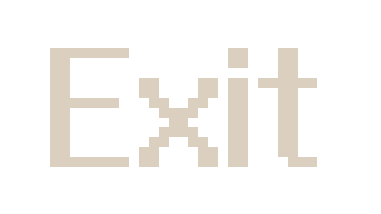
<style>
.page{position:relative;width:381px;height:214px;background:#ffffff}
.page>*{position:absolute;margin:0}
.t1{font:158.3px "System";color:#dbd0c0}
</style>
<div class="page">
<p class="t1" style="left:50px;top:48px;width:267px;height:119px">Exit</p>
</div>
